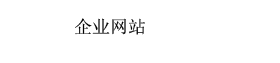
<style>
.page{position:relative;width:280px;height:63px;background:#ffffff}
.page>*{position:absolute;margin:0}
.t1{font:18px "SimSun";color:#000000}
</style>
<div class="page">
<p class="t1" style="left:75px;top:18px;width:70px;height:17px">企业网站</p>
</div>
